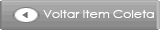
<style>
.page{position:relative;width:160px;height:30px}
.page>*{position:absolute;margin:0}
.t1{font:10.8px "CenturyGothic";color:#ffffff;scale:1.16 1}
</style>
<div class="page">
<p class="t1" style="left:43px;top:10px;width:111px;height:8px">Voltar Item Coleta</p>
</div>
